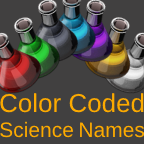
<style>
.page{position:relative;width:144px;height:144px;background:#414040}
.page>*{position:absolute;margin:0}
.t1{font:21px "ArialMT";color:#fcaa00}
.t2{font:26px "ArialMT";color:#fcaa00}
</style>
<div class="page">
<p class="t1" style="left:0px;top:93px;width:145px;height:45px;text-align:center"><span class="t2">Color Coded<br></span>Science Names</p>
</div>
